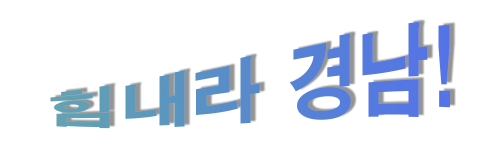
<style>
.page{position:relative;width:500px;height:150px;background:#ffffff}
.page>*{position:absolute;margin:0}
.t1{font:72px "H2gtrE";color:#5681d7}
</style>
<div class="page">
<p class="t1" style="left:50px;top:22px;width:400px;height:107px">힘내라 경남!</p>
</div>
